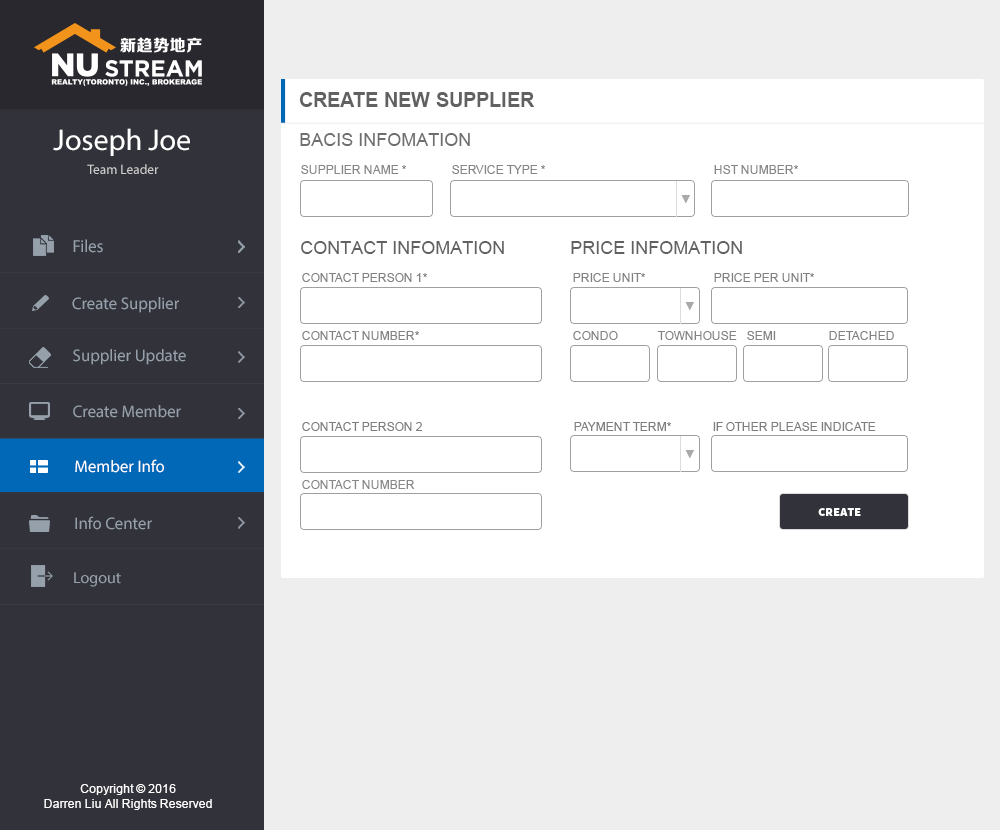
<style>
.page{position:relative;width:1000px;height:830px;background:#ffffff}
.page>*{position:absolute;margin:0}
.t1{font:20px "Arial-BoldMT";color:#616161}
.t2{font:30px "MyriadPro-Regular";color:#ffffff}
.t3{font:18px "ArialMT";color:#6e6e6e}
.t4{font:13.4px "MyriadPro-Regular";color:#cccccc}
.t5{font:12px "ArialMT";color:#868686}
.t6{font:10px "AdobeHeitiStd-Regular";color:#a9a9a9}
.t7{font:17.6px "MyriadPro-Regular";color:#95a0aa;scale:0.96 1}
.t8{font:18px "ArialMT";color:#616161}
.t9{font:12px "ArialMT";color:#828282}
.t10{font:16.8px "MyriadPro-Regular";color:#95a0aa}
.t11{font:12px "ArialMT";color:#7e7e7e}
.t12{font:16.8px "MyriadPro-Regular";color:#ffffff}
.t13{font:12px "SourceSansPro-Black";color:#ffffff}
.t14{font:16px "MyriadPro-Regular";color:#95a0aa}
.t15{font:12px "ArialMT";color:#ffffff}
</style>
<div class="page">
<p class="t1" style="left:300px;top:92px;width:235px;height:15px">CREATE NEW SUPPLIER</p>
<p class="t2" style="left:53px;top:128px;width:137px;height:28px">Joseph Joe</p>
<p class="t3" style="left:300px;top:133px;width:170px;height:13px">BACIS INFOMATION</p>
<p class="t4" style="left:87px;top:164px;width:72px;height:10px">Team Leader</p>
<p class="t5" style="left:301px;top:165px;width:105px;height:9px">SUPPLIER NAME *</p>
<p class="t5" style="left:452px;top:165px;width:93px;height:9px">SERVICE TYPE *</p>
<p class="t5" style="left:714px;top:165px;width:84px;height:9px">HST NUMBER*</p>
<p class="t6" style="left:681px;top:195px;width:9px;height:9px">▼</p>
<p class="t7" style="left:73px;top:239px;width:30px;height:14px">Files</p>
<p class="t8" style="left:301px;top:241px;width:203px;height:13px">CONTACT INFOMATION</p>
<p class="t8" style="left:571px;top:241px;width:171px;height:13px">PRICE INFOMATION</p>
<p class="t9" style="left:302px;top:273px;width:125px;height:9px">CONTACT PERSON 1*</p>
<p class="t9" style="left:573px;top:273px;width:72px;height:9px">PRICE UNIT*</p>
<p class="t9" style="left:714px;top:273px;width:100px;height:9px">PRICE PER UNIT*</p>
<p class="t10" style="left:72px;top:297px;width:107px;height:16px">Create Supplier</p>
<p class="t6" style="left:685px;top:302px;width:9px;height:9px">▼</p>
<p class="t9" style="left:302px;top:331px;width:117px;height:9px">CONTACT NUMBER*</p>
<p class="t9" style="left:573px;top:331px;width:45px;height:9px">CONDO</p>
<p class="t9" style="left:657px;top:331px;width:80px;height:9px">TOWNHOUSE</p>
<p class="t9" style="left:747px;top:331px;width:29px;height:9px">SEMI</p>
<p class="t9" style="left:829px;top:331px;width:65px;height:9px">DETACHED</p>
<p class="t10" style="left:73px;top:349px;width:113px;height:16px">Supplier Update</p>
<p class="t10" style="left:73px;top:405px;width:108px;height:13px">Create Member</p>
<p class="t11" style="left:302px;top:422px;width:120px;height:9px">CONTACT PERSON 2</p>
<p class="t11" style="left:574px;top:422px;width:97px;height:9px">PAYMENT TERM*</p>
<p class="t11" style="left:713px;top:422px;width:163px;height:9px">IF OTHER PLEASE INDICATE</p>
<p class="t12" style="left:75px;top:459px;width:89px;height:14px">Member Info</p>
<p class="t6" style="left:685px;top:450px;width:9px;height:9px">▼</p>
<p class="t5" style="left:302px;top:480px;width:113px;height:9px">CONTACT NUMBER</p>
<p class="t13" style="left:818px;top:508px;width:43px;height:8px">CREATE</p>
<p class="t10" style="left:75px;top:516px;width:77px;height:14px">Info Center</p>
<p class="t14" style="left:74px;top:572px;width:47px;height:15px">Logout</p>
<p class="t15" style="left:44px;top:784px;width:168px;height:26px;text-align:center">Copyright © 2016<br>Darren Liu All Rights Reserved</p>
</div>
